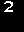
<style>
.page{position:relative;width:24px;height:32px;background:#000000}
.page>*{position:absolute;margin:0}
.t1{font:29.2px "ArialMT";color:#ffffff}
</style>
<div class="page">
<p class="t1" style="left:4px;top:1px;width:9px;height:11px">²</p>
</div>
